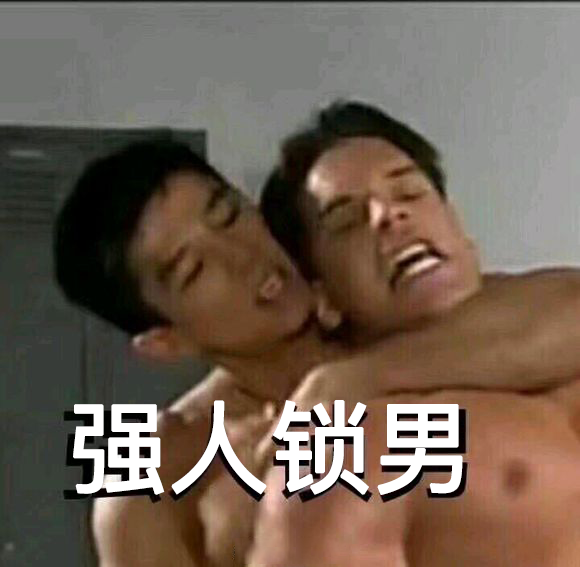
<style>
.page{position:relative;width:580px;height:567px}
.page>*{position:absolute;margin:0}
.t1{font:98.9px "PingFangSC-Regular";color:#ffffff;font-weight:bold}
</style>
<div class="page">
<p class="t1" style="left:73px;top:400px;width:390px;height:95px">强人锁男</p>
</div>
